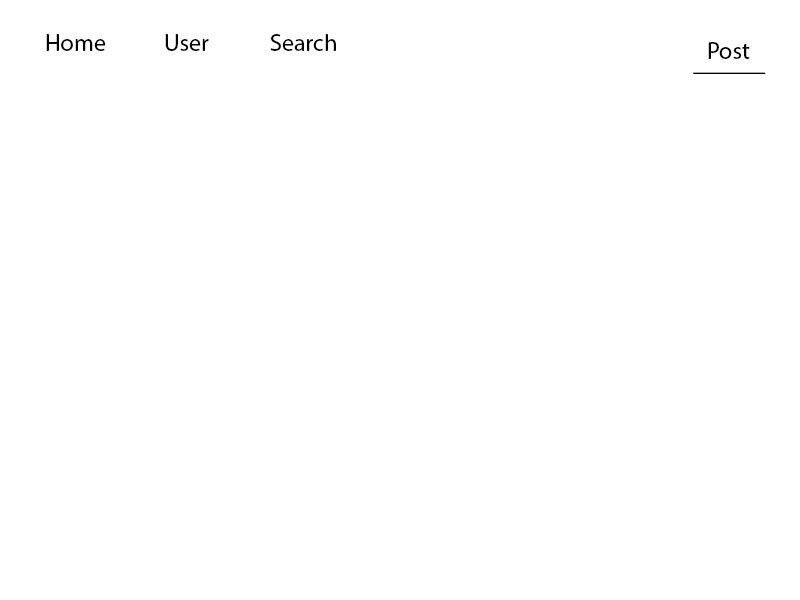
<style>
.page{position:relative;width:800px;height:600px;background:#ffffff}
.page>*{position:absolute;margin:0}
.t1{font:24px "MyriadPro-Regular";color:#000000}
</style>
<div class="page">
<p class="t1" style="left:46px;top:34px;width:60px;height:17px">Home</p>
<p class="t1" style="left:165px;top:34px;width:44px;height:17px">User</p>
<p class="t1" style="left:270px;top:34px;width:66px;height:17px">Search</p>
<p class="t1" style="left:708px;top:42px;width:42px;height:17px">Post</p>
<p class="t1" style="left:693px;top:72px;width:73px;height:2px">______</p>
</div>
